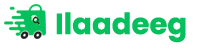
<style>
.page{position:relative;width:200px;height:50px;background:#ffffff}
.page>*{position:absolute;margin:0}
.t1{font:29.2px "Poppins-Bold";color:#03c05c}
</style>
<div class="page">
<p class="t1" style="left:56px;top:12px;width:130px;height:31px">Ilaadeeg</p>
</div>
